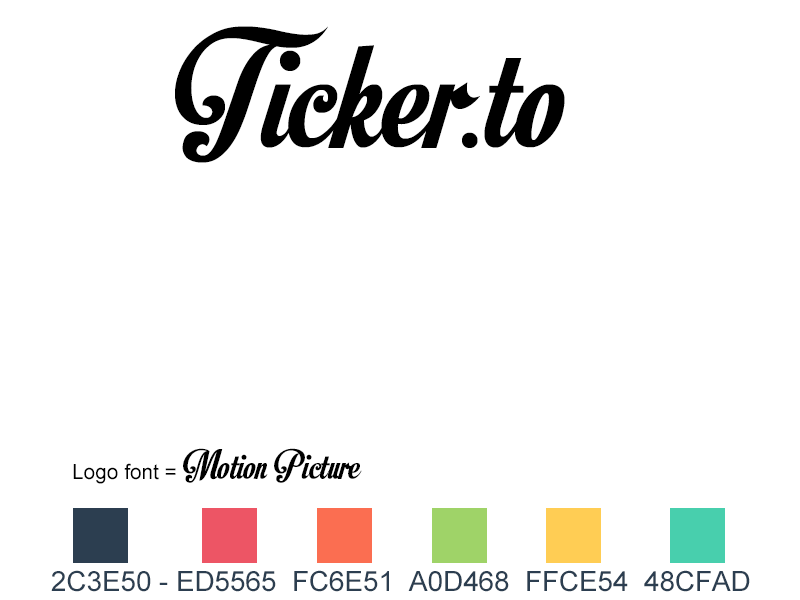
<style>
.page{position:relative;width:800px;height:600px;background:#ffffff}
.page>*{position:absolute;margin:0}
.t1{font:166.7px "MotionPicturePersonalUse";color:#000000}
.t2{font:41.7px "MotionPicturePersonalUse";color:#000000}
.t3{font:20.8px "ArialMT";color:#000000}
.t4{font:27.8px "ArialMT";color:#2c3e50}
</style>
<div class="page">
<p class="t1" style="left:175px;top:26px;width:390px;height:137px">Ticker.to</p>
<p class="t2" style="left:73px;top:448px;width:289px;height:36px"><span class="t3">Logo font = </span>Motion Picture</p>
<p class="t4" style="left:51px;top:570px;width:699px;height:22px">2C3E50 - ED5565  FC6E51  A0D468  FFCE54  48CFAD</p>
</div>
